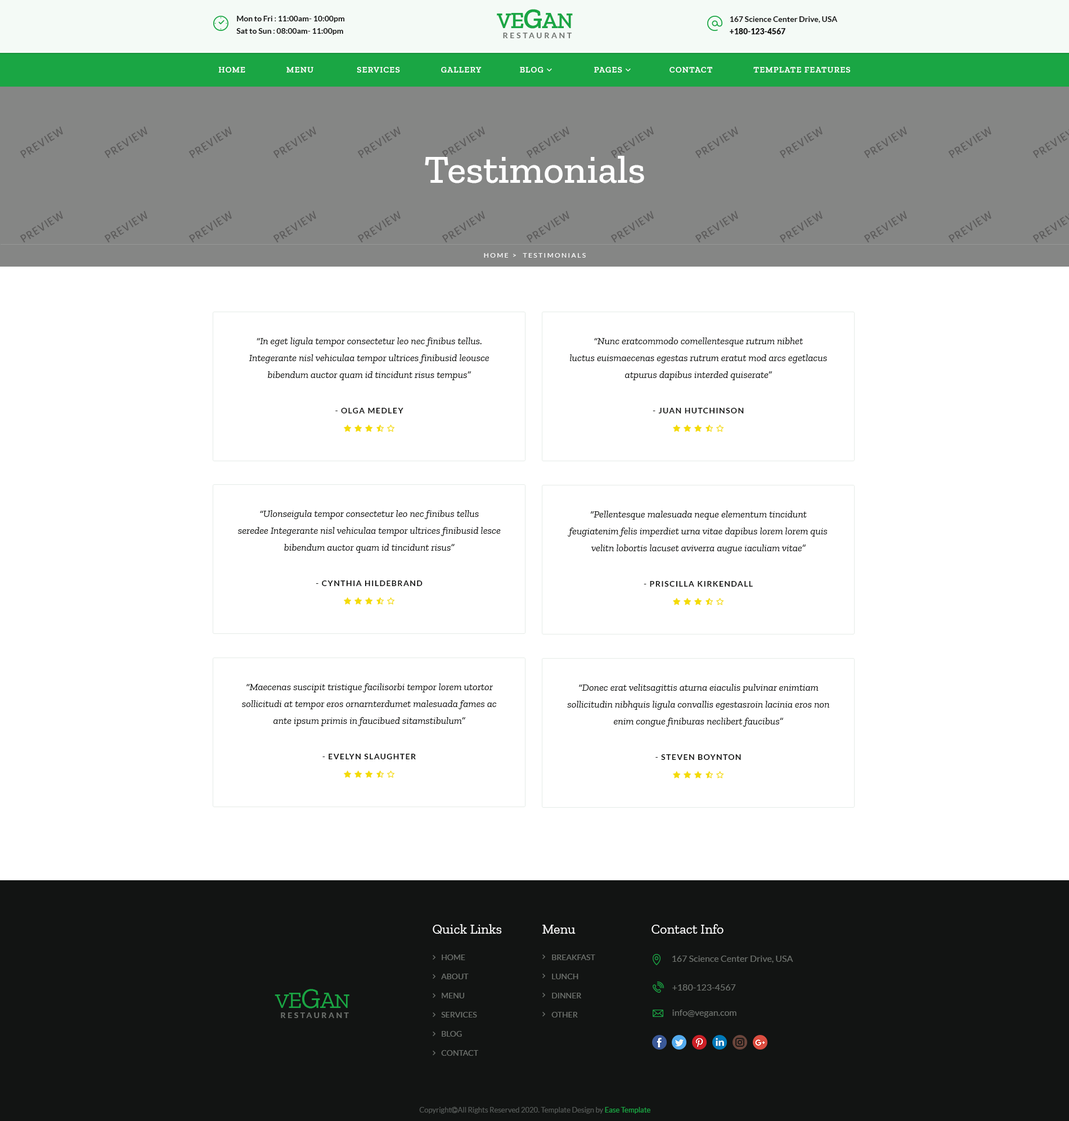
<style>
.page{position:relative;width:1069px;height:1121px;background:#ffffff}
.page>*{position:absolute;margin:0}
.t1{font:7.9px/12.4px "Lato-Bold";color:#121312}
.t2{font:7.9px/12.4px "Lato-Regular";color:#121312}
.t3{font:21.4px "ZillaSlab-SemiBold";letter-spacing:-0.03em;color:#1aa644;text-transform:uppercase}
.t4{font:23.6px "ZillaSlab-SemiBold";letter-spacing:-0.03em;color:#1aa644;text-transform:uppercase}
.t5{font:28.1px "ZillaSlab-SemiBold";letter-spacing:-0.03em;color:#1aa644;text-transform:uppercase}
.t6{font:7.9px/12.4px "Lato-Black";color:#121312}
.t7{font:7.9px "Lato-Bold";letter-spacing:0.26em;color:#6e726e;text-transform:uppercase}
.t8{font:39.4px "ZillaSlab-Medium";color:#ffffff}
.t9{font:6.8px "Lato-Regular";letter-spacing:0.2em;color:#ffffff;text-transform:uppercase}
.t10{font:10.1px/16.9px "ZillaSlab-Italic";color:#121413}
.t11{font:7.9px "Lato-Bold";letter-spacing:0.1em;color:#121413;text-transform:uppercase}
.t12{font:13.5px "ZillaSlab-Regular";color:#ffffff}
.t13{font:7.9px/19.1px "Lato-Regular";color:#6e726e;text-transform:uppercase}
.t14{font:9px "Lato-Regular";color:#6e726e}
.t15{font:21.4px "ZillaSlab-Regular";letter-spacing:-0.03em;color:#1aa644;text-transform:uppercase}
.t16{font:23.6px "ZillaSlab-Regular";letter-spacing:-0.03em;color:#1aa644;text-transform:uppercase}
.t17{font:28.1px "ZillaSlab-Regular";letter-spacing:-0.03em;color:#1aa644;text-transform:uppercase}
.t18{font:7.9px "Lato-Bold";letter-spacing:0.25em;color:#6e726e;text-transform:uppercase}
</style>
<div class="page">
<p class="t1" style="left:236px;top:16px;width:109px;height:19px">Mon to Fri<span class="t2"> : </span>11:00am- 10:00pm<br>Sat to Sun<span class="t2"> : </span>08:00am- 11:00pm</p>
<p class="t3" style="left:497px;top:9px;width:76px;height:20px">V<span class="t4">e</span><span class="t5">G</span><span class="t4">a</span>n</p>
<p class="t1" style="left:730px;top:16px;width:108px;height:18px">167 Science Center Drive, USA<br><span class="t6">+180-123-4567</span></p>
<p class="t7" style="left:503px;top:33px;width:69px;height:5px">Restaurant</p>
<p class="t8" style="left:425px;top:156px;width:219px;height:27px">Testimonials</p>
<p class="t9" style="left:484px;top:253px;width:102px;height:5px">Home &gt;  Testimonials</p>
<p class="t10" style="left:249px;top:338px;width:240px;height:42px;text-align:center">“In eget ligula tempor consectetur leo nec finibus tellus. Integerante nisl vehiculaa tempor ultrices finibusid leousce bibendum auctor quam id tincidunt risus tempus”</p>
<p class="t10" style="left:570px;top:338px;width:257px;height:42px;text-align:center">“Nunc eratcommodo comellentesque rutrum nibhet <br>luctus euismaecenas egestas rutrum eratut mod arcs egetlacus atpurus dapibus interded quiserate”</p>
<p class="t11" style="left:335px;top:408px;width:68px;height:5px">- Olga Medley</p>
<p class="t11" style="left:652px;top:408px;width:92px;height:5px">- Juan Hutchinson</p>
<p class="t10" style="left:238px;top:510px;width:263px;height:43px;text-align:center">“Ulonseigula tempor consectetur leo nec finibus tellus <br>seredee Integerante nisl vehiculaa tempor ultrices finibusid lesce bibendum auctor quam id tincidunt risus”</p>
<p class="t10" style="left:568px;top:511px;width:259px;height:43px;text-align:center">“Pellentesque malesuada neque elementum tincidunt feugiatenim felis imperdiet urna vitae dapibus lorem lorem quis velitn lobortis lacuset aviverra augue iaculiam vitae”</p>
<p class="t11" style="left:316px;top:580px;width:106px;height:6px">- Cynthia Hildebrand</p>
<p class="t11" style="left:644px;top:581px;width:109px;height:6px">- Priscilla Kirkendall</p>
<p class="t10" style="left:242px;top:683px;width:254px;height:43px;text-align:center">“Maecenas suscipit tristique facilisorbi tempor lorem utortor sollicitudi at tempor eros ornarnterdumet malesuada fames ac ante ipsum primis in faucibued sitamstibulum”</p>
<p class="t10" style="left:567px;top:684px;width:262px;height:43px;text-align:center">“Donec erat velitsagittis aturna eiaculis pulvinar enimtiam sollicitudin nibhquis ligula convallis egestasroin lacinia eros non enim congue finiburas neclibert faucibus”</p>
<p class="t11" style="left:322px;top:754px;width:94px;height:5px">- Evelyn Slaughter</p>
<p class="t11" style="left:655px;top:754px;width:86px;height:6px">- Steven Boynton</p>
<p class="t12" style="left:433px;top:924px;width:69px;height:10px">Quick Links</p>
<p class="t12" style="left:542px;top:925px;width:33px;height:9px">Menu</p>
<p class="t12" style="left:651px;top:924px;width:72px;height:10px">Contact Info</p>
<p class="t13" style="left:441px;top:955px;width:37px;height:101px">Home<br>About<br>Menu<br>Services<br>Blog<br>Contact</p>
<p class="t13" style="left:551px;top:955px;width:44px;height:63px">Breakfast<br>Lunch<br>Dinner<br>Other</p>
<p class="t14" style="left:672px;top:956px;width:121px;height:7px">167 Science Center Drive, USA</p>
<p class="t15" style="left:274px;top:989px;width:75px;height:20px">V<span class="t16">e</span><span class="t17">G</span><span class="t16">a</span>n</p>
<p class="t14" style="left:672px;top:984px;width:64px;height:7px">+180-123-4567</p>
<p class="t18" style="left:281px;top:1012px;width:68px;height:6px">Restaurant</p>
<p class="t14" style="left:672px;top:1010px;width:64px;height:8px">info@vegan.com</p>
</div>
